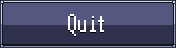
<style>
.page{position:relative;width:176px;height:48px;background:#54577f}
.page>*{position:absolute;margin:0}
.t1{font:24px "Terminal";color:#ffffff}
</style>
<div class="page">
<p class="t1" style="left:68px;top:14px;width:36px;height:22px">Quit</p>
</div>
